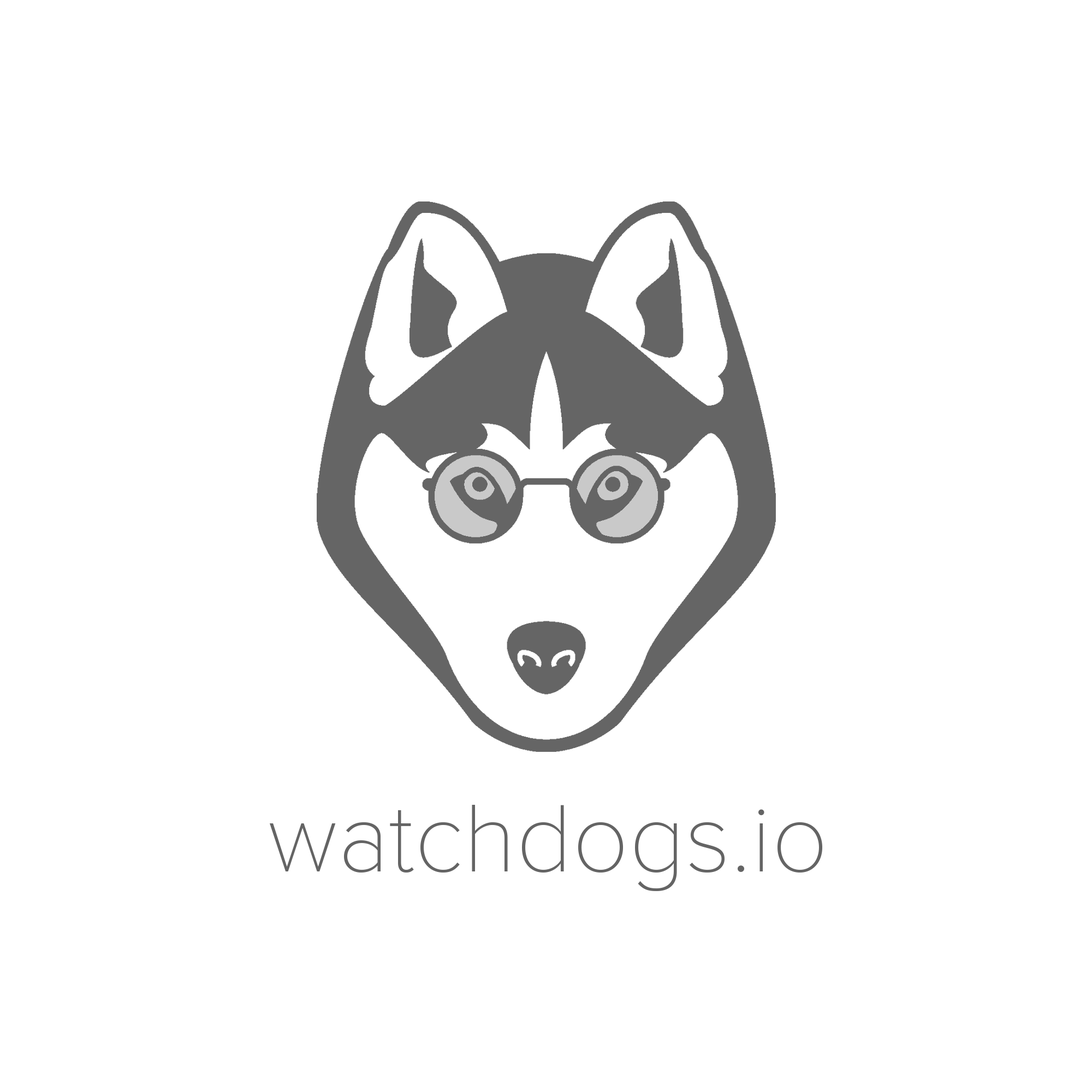
<style>
.page{position:relative;width:1092px;height:1092px;background:#ffffff}
.page>*{position:absolute;margin:0}
.t1{font:99.6px "ProximaNova-Thin";color:#646464}
</style>
<div class="page">
<p class="t1" style="left:270px;top:805px;width:552px;height:87px">watchdogs.io</p>
</div>
